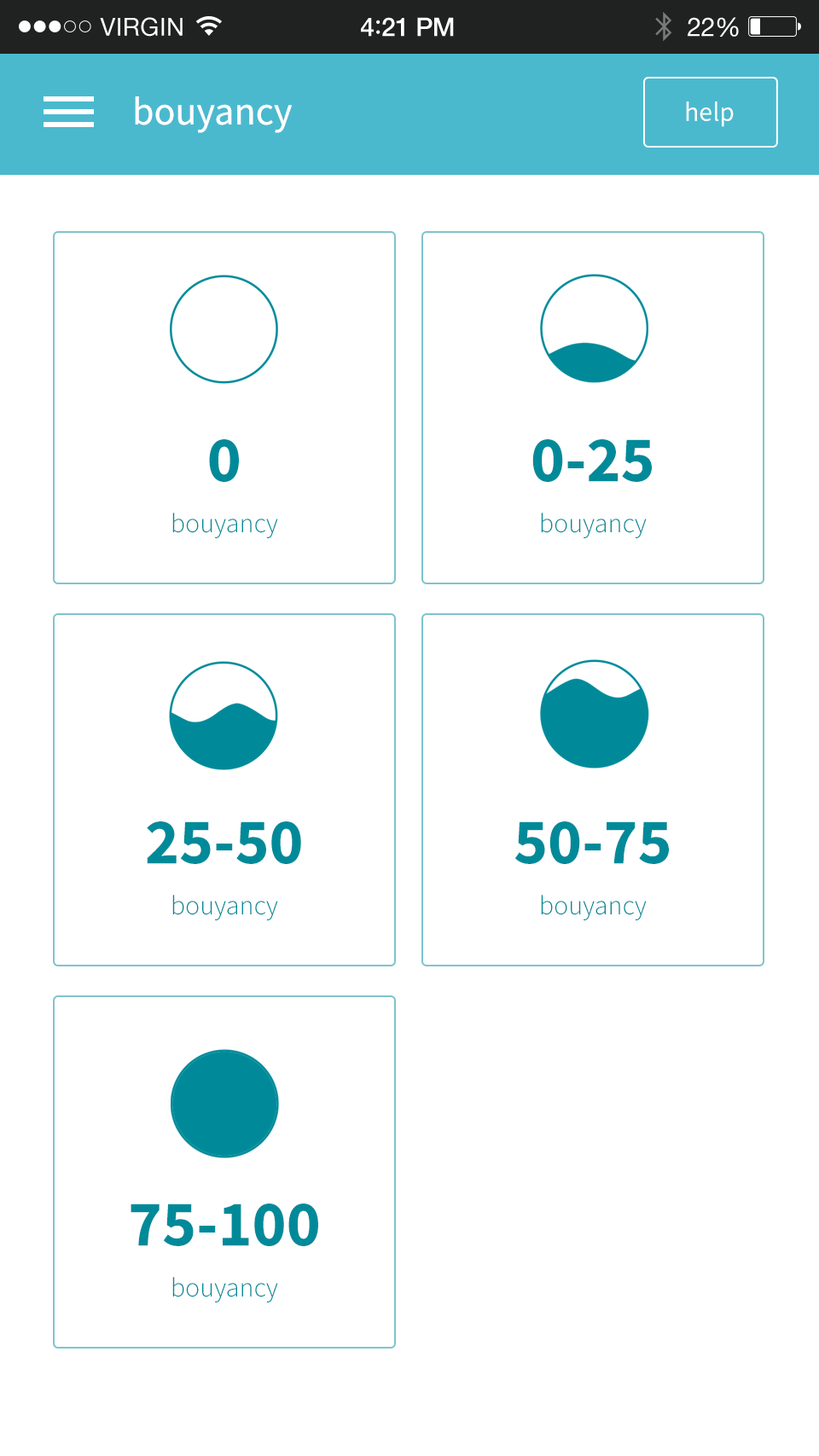
<style>
.page{position:relative;width:819px;height:1456px;background:#ffffff}
.page>*{position:absolute;margin:0}
.t1{font:39.2px "SourceSansPro-Regular";color:#ffffff}
.t2{font:27.3px "SourceSansPro-Regular";color:#ffffff}
.t3{font:64.8px "SourceSansPro-Bold";color:#008a99}
.t4{font:27.3px "SourceSansPro-Light";color:#008a99}
</style>
<div class="page">
<p class="t1" style="left:135px;top:96px;width:157px;height:37px">bouyancy</p>
<p class="t2" style="left:686px;top:102px;width:48px;height:25px">help</p>
<p class="t3" style="left:209px;top:439px;width:30px;height:43px">0</p>
<p class="t3" style="left:532px;top:439px;width:120px;height:43px">0-25</p>
<p class="t4" style="left:172px;top:513px;width:106px;height:25px">bouyancy</p>
<p class="t4" style="left:541px;top:513px;width:106px;height:25px">bouyancy</p>
<p class="t3" style="left:147px;top:821px;width:154px;height:43px">25-50</p>
<p class="t3" style="left:514px;top:821px;width:155px;height:43px">50-75</p>
<p class="t4" style="left:172px;top:895px;width:106px;height:25px">bouyancy</p>
<p class="t4" style="left:541px;top:895px;width:106px;height:25px">bouyancy</p>
<p class="t3" style="left:131px;top:1204px;width:187px;height:42px">75-100</p>
<p class="t4" style="left:172px;top:1277px;width:106px;height:26px">bouyancy</p>
</div>
